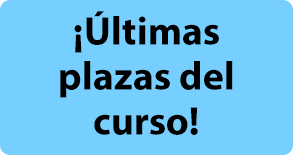
<style>
.page{position:relative;width:293px;height:155px;background:#77cfff}
.page>*{position:absolute;margin:0}
.t1{font:40px/45px "MyriadPro-Bold";color:#000000}
</style>
<div class="page">
<p class="t1" style="left:60px;top:11px;width:173px;height:124px;text-align:center">¡Últimas <br>plazas del<br>curso!</p>
</div>
